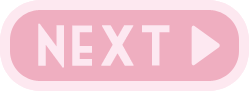
<style>
.page{position:relative;width:249px;height:91px;background:#efaec0}
.page>*{position:absolute;margin:0}
.t1{font:55px "MarketDeco";letter-spacing:0.04em;color:#fde8f1;font-weight:bold}
</style>
<div class="page">
<p class="t1" style="left:38px;top:23px;width:132px;height:45px">next</p>
<p class="t1" style="left:38px;top:23px;width:132px;height:45px">next</p>
</div>
